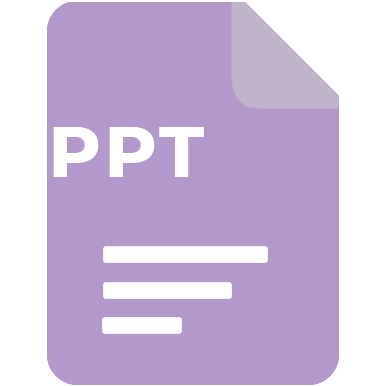
<style>
.page{position:relative;width:386px;height:386px;background:#b399cb}
.page>*{position:absolute;margin:0}
.t1{font:70px "Montserrat-Bold";letter-spacing:0.06em;color:#ffffff;text-transform:uppercase;font-weight:bold}
</style>
<div class="page">
<p class="t1" style="left:53px;top:127px;width:151px;height:50px">ppt</p>
</div>
